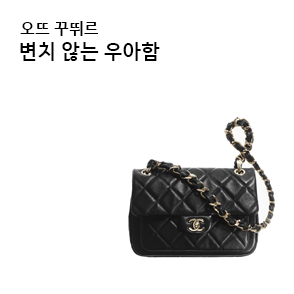
<style>
.page{position:relative;width:294px;height:294px;background:#ffffff}
.page>*{position:absolute;margin:0}
.t1{font:16px "HancomGothicBold";color:#000000}
.t2{font:20px "HancomGothicBold";color:#000000}
</style>
<div class="page">
<p class="t1" style="left:20px;top:21px;width:79px;height:15px">오뜨 꾸뛰르</p>
<p class="t2" style="left:20px;top:42px;width:140px;height:19px">변치 않는 우아함</p>
</div>
